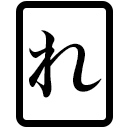
<style>
.page{position:relative;width:128px;height:128px;background:#ffffff}
.page>*{position:absolute;margin:0}
.t1{font:77px "HiraMinProN-W6";color:#000000}
</style>
<div class="page">
<p class="t1" style="left:29px;top:30px;width:73px;height:68px">れ</p>
</div>
